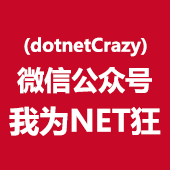
<style>
.page{position:relative;width:170px;height:170px;background:#c70827}
.page>*{position:absolute;margin:0}
.t1{font:18px "MicrosoftYaHei-Bold";color:#ffffff}
.t2{font:27px "MicrosoftYaHei-Bold";color:#ffffff}
.t3{font:30px "MicrosoftYaHei-Bold";color:#ffffff}
</style>
<div class="page">
<p class="t1" style="left:24px;top:37px;width:123px;height:20px">(dotnetCrazy)</p>
<p class="t2" style="left:17px;top:67px;width:135px;height:27px">微信公众号</p>
<p class="t3" style="left:9px;top:106px;width:152px;height:30px">我为NET狂</p>
</div>
